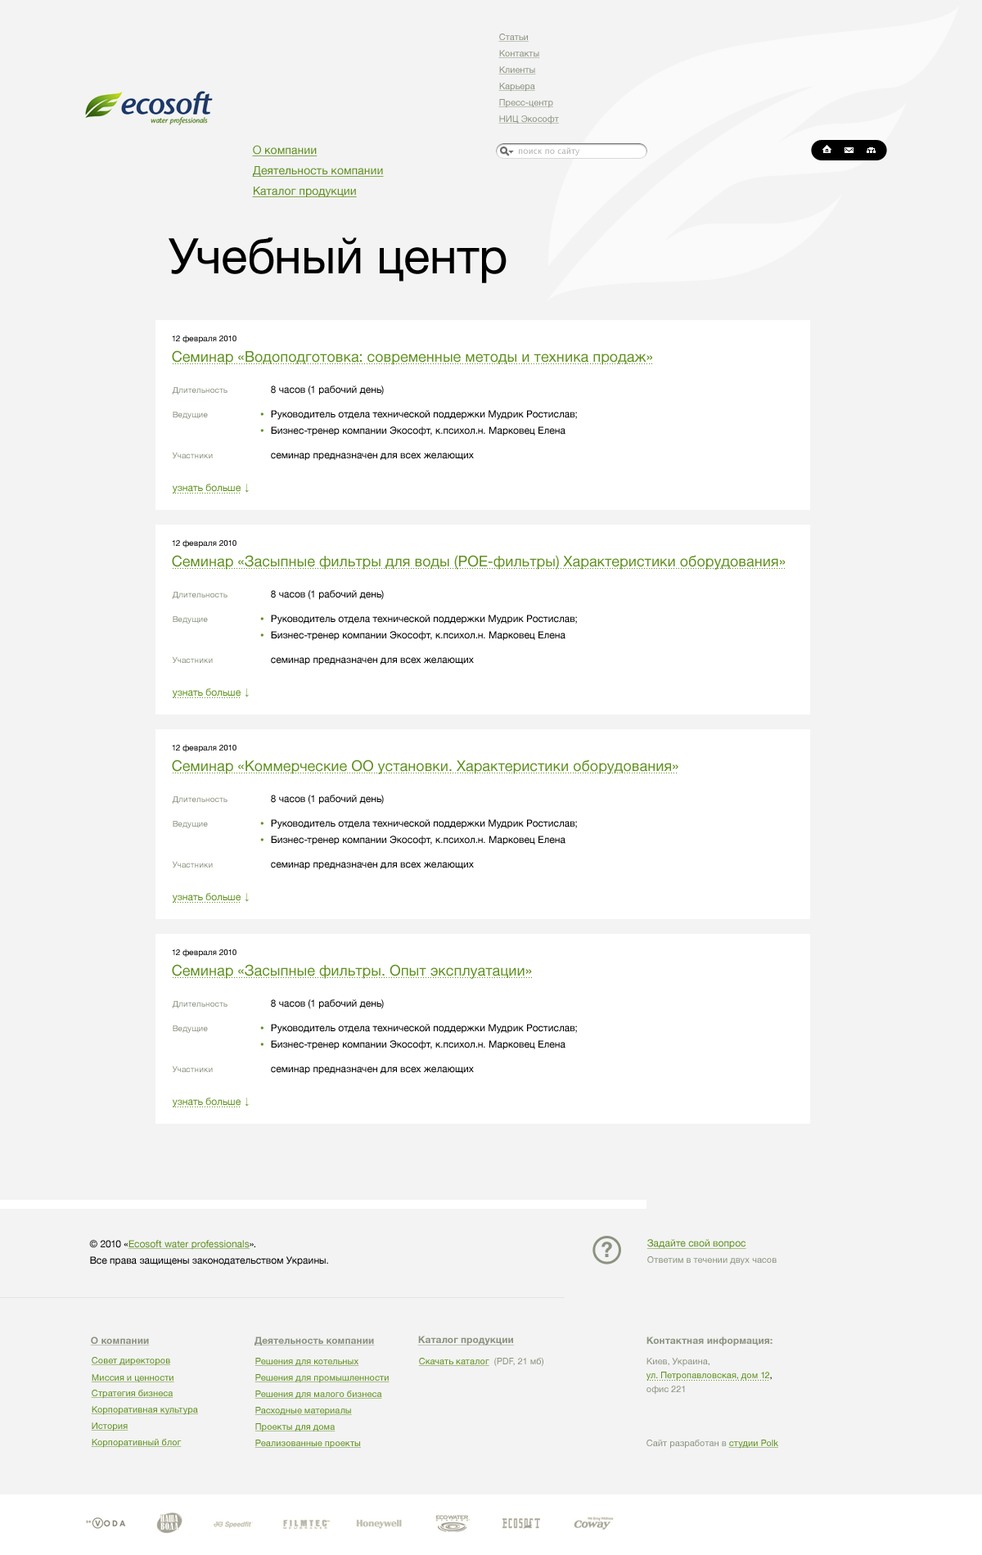
<style>
.page{position:relative;width:982px;height:1555px;background:#f3f3f3}
.page>*{position:absolute;margin:0}
.t1{font:9px "HelveticaNeue";color:#8b9380;text-decoration:underline}
.t2{font:11.5px "HelveticaNeue";color:#5e901f;text-decoration:underline}
.t3{font:8.2px "LucidaGrande";color:#b2b2b2}
.t4{font:49.1px "HelveticaNeue";color:#000000}
.t5{font:8.2px "HelveticaNeue";color:#000000}
.t6{font:14.7px "HelveticaNeue";color:#5e901f}
.t7{font:8.2px "HelveticaNeue";color:#8b9380}
.t8{font:9.8px "HelveticaNeue";color:#000000}
.t9{font:9.8px/16.4px "HelveticaNeue";color:#000000}
.t10{font:9.8px "HelveticaNeue";color:#5e901f}
.t11{font:9.8px "ArialMT";color:#5e901f}
.t12{font:9.8px/16.4px "HelveticaNeue";color:#5e901f;text-decoration:underline}
.t13{font:9.8px "HelveticaNeue";color:#5e901f;text-decoration:underline}
.t14{font:9px "HelveticaNeue";color:#8b9380}
.t15{font:9.8px "HelveticaNeue-Bold";color:#8b9380;text-decoration:underline}
.t16{font:9px/13.9px "HelveticaNeue";color:#5e901f}
.t17{font:9.8px/16.4px "HelveticaNeue-Bold";color:#8b9380}
.t18{font:9px/20.5px "HelveticaNeue";color:#8b9380}
.t19{font:9px/13.9px "HelveticaNeue";color:#000000}
.t20{font:9px/13.9px "HelveticaNeue";color:#8b9380}
.t21{font:9px "HelveticaNeue";color:#5e901f;text-decoration:underline}
</style>
<div class="page">
<p class="t1" style="left:498px;top:34px;width:31px;height:8px">Статьи</p>
<p class="t1" style="left:498px;top:50px;width:42px;height:8px">Контакты</p>
<p class="t1" style="left:498px;top:66px;width:38px;height:8px">Клиенты</p>
<p class="t1" style="left:498px;top:83px;width:37px;height:9px">Карьера</p>
<p class="t1" style="left:498px;top:99px;width:55px;height:9px">Пресс-центр</p>
<p class="t1" style="left:498px;top:115px;width:61px;height:9px">НИЦ Экософт</p>
<p class="t2" style="left:252px;top:145px;width:65px;height:11px">О компании</p>
<p class="t3" style="left:519px;top:147px;width:61px;height:8px">поиск по сайту</p>
<p class="t2" style="left:252px;top:166px;width:132px;height:11px">Деятельность компании</p>
<p class="t2" style="left:252px;top:187px;width:105px;height:10px">Каталог продукции</p>
<p class="t4" style="left:169px;top:237px;width:337px;height:46px">Учебный центр</p>
<p class="t5" style="left:172px;top:335px;width:64px;height:8px">12 февраля 2010</p>
<p class="t6" style="left:172px;top:350px;width:480px;height:15px">Семинар «Водоподготовка: современные методы и техника продаж»</p>
<p class="t7" style="left:172px;top:387px;width:55px;height:7px">Длительность</p>
<p class="t8" style="left:271px;top:385px;width:113px;height:10px">8 часов (1 рабочий день)</p>
<p class="t7" style="left:173px;top:412px;width:35px;height:7px">Ведущие</p>
<p class="t9" style="left:271px;top:410px;width:306px;height:26px">Руководитель отдела технической поддержки Мудрик Ростислав;<br>Бизнес-тренер компании Экософт, к.психол.н. Марковец Елена</p>
<p class="t7" style="left:172px;top:452px;width:41px;height:6px">Участники</p>
<p class="t8" style="left:271px;top:452px;width:203px;height:9px">семинар предназначен для всех желающих</p>
<p class="t10" style="left:172px;top:484px;width:69px;height:9px">узнать больше</p>
<p class="t11" style="left:245px;top:484px;width:4px;height:9px">↓</p>
<p class="t5" style="left:172px;top:539px;width:64px;height:8px">12 февраля 2010</p>
<p class="t6" style="left:172px;top:555px;width:613px;height:14px">Семинар «Засыпные фильтры для воды (POE-фильтры) Характеристики оборудования»</p>
<p class="t7" style="left:172px;top:592px;width:55px;height:7px">Длительность</p>
<p class="t8" style="left:271px;top:590px;width:113px;height:10px">8 часов (1 рабочий день)</p>
<p class="t7" style="left:173px;top:616px;width:35px;height:7px">Ведущие</p>
<p class="t9" style="left:271px;top:614px;width:306px;height:27px">Руководитель отдела технической поддержки Мудрик Ростислав;<br>Бизнес-тренер компании Экософт, к.психол.н. Марковец Елена</p>
<p class="t7" style="left:172px;top:656px;width:41px;height:7px">Участники</p>
<p class="t8" style="left:271px;top:657px;width:203px;height:8px">семинар предназначен для всех желающих</p>
<p class="t10" style="left:172px;top:688px;width:69px;height:10px">узнать больше</p>
<p class="t11" style="left:245px;top:688px;width:4px;height:9px">↓</p>
<p class="t5" style="left:172px;top:744px;width:64px;height:8px">12 февраля 2010</p>
<p class="t6" style="left:172px;top:759px;width:506px;height:15px">Семинар «Коммерческие ОО установки. Характеристики оборудования»</p>
<p class="t7" style="left:172px;top:796px;width:55px;height:7px">Длительность</p>
<p class="t8" style="left:271px;top:794px;width:113px;height:10px">8 часов (1 рабочий день)</p>
<p class="t7" style="left:173px;top:821px;width:35px;height:7px">Ведущие</p>
<p class="t9" style="left:271px;top:819px;width:306px;height:26px">Руководитель отдела технической поддержки Мудрик Ростислав;<br>Бизнес-тренер компании Экософт, к.психол.н. Марковец Елена</p>
<p class="t7" style="left:172px;top:861px;width:41px;height:6px">Участники</p>
<p class="t8" style="left:271px;top:862px;width:203px;height:8px">семинар предназначен для всех желающих</p>
<p class="t10" style="left:172px;top:893px;width:69px;height:9px">узнать больше</p>
<p class="t11" style="left:245px;top:893px;width:4px;height:9px">↓</p>
<p class="t5" style="left:172px;top:948px;width:64px;height:8px">12 февраля 2010</p>
<p class="t6" style="left:172px;top:964px;width:360px;height:15px">Семинар «Засыпные фильтры. Опыт эксплуатации»</p>
<p class="t7" style="left:172px;top:1001px;width:55px;height:7px">Длительность</p>
<p class="t8" style="left:271px;top:999px;width:113px;height:10px">8 часов (1 рабочий день)</p>
<p class="t7" style="left:173px;top:1025px;width:35px;height:8px">Ведущие</p>
<p class="t9" style="left:271px;top:1024px;width:306px;height:26px">Руководитель отдела технической поддержки Мудрик Ростислав;<br>Бизнес-тренер компании Экософт, к.психол.н. Марковец Елена</p>
<p class="t7" style="left:172px;top:1065px;width:41px;height:7px">Участники</p>
<p class="t8" style="left:271px;top:1066px;width:203px;height:8px">семинар предназначен для всех желающих</p>
<p class="t10" style="left:172px;top:1097px;width:69px;height:10px">узнать больше</p>
<p class="t11" style="left:245px;top:1097px;width:4px;height:9px">↓</p>
<p class="t9" style="left:89px;top:1240px;width:239px;height:26px">© 2010 «<span class="t12">Ecosoft water professionals</span>».<br>Все права защищены законодательством Украины.</p>
<p class="t13" style="left:646px;top:1239px;width:100px;height:10px">Задайте свой вопрос</p>
<p class="t14" style="left:647px;top:1256px;width:129px;height:9px">Ответим в течении двух часов</p>
<p class="t15" style="left:90px;top:1336px;width:60px;height:9px">О компании</p>
<p class="t15" style="left:254px;top:1336px;width:121px;height:9px">Деятельность компании</p>
<p class="t15" style="left:417px;top:1335px;width:97px;height:10px">Каталог продукции</p>
<p class="t16" style="left:646px;top:1336px;width:126px;height:58px"><span class="t17">Контактная информация:<br></span><span class="t18">Киев, Украина,<br></span>ул. Петропавловская, дом 12<span class="t19">,<br></span><span class="t20">офис 221</span></p>
<p class="t21" style="left:91px;top:1357px;width:80px;height:9px">Совет директоров</p>
<p class="t21" style="left:254px;top:1357px;width:105px;height:9px">Решения для котельных</p>
<p class="t21" style="left:418px;top:1357px;width:71px;height:9px">Скачать каталог</p>
<p class="t14" style="left:494px;top:1357px;width:49px;height:9px">(PDF, 21 мб)</p>
<p class="t21" style="left:91px;top:1374px;width:83px;height:8px">Миссия и ценности</p>
<p class="t21" style="left:254px;top:1374px;width:135px;height:9px">Решения для промышленности</p>
<p class="t21" style="left:91px;top:1389px;width:82px;height:9px">Стратегия бизнеса</p>
<p class="t21" style="left:254px;top:1390px;width:128px;height:8px">Решения для малого бизнеса</p>
<p class="t21" style="left:91px;top:1406px;width:107px;height:9px">Корпоративная культура</p>
<p class="t21" style="left:254px;top:1406px;width:98px;height:9px">Расходные материалы</p>
<p class="t21" style="left:91px;top:1422px;width:37px;height:9px">История</p>
<p class="t21" style="left:254px;top:1423px;width:81px;height:9px">Проекты для дома</p>
<p class="t21" style="left:91px;top:1438px;width:91px;height:9px">Корпоративный блог</p>
<p class="t21" style="left:254px;top:1439px;width:107px;height:9px">Реализованные проекты</p>
<p class="t14" style="left:646px;top:1439px;width:132px;height:9px">Сайт разработан в <span class="t21">студии Polk</span></p>
</div>
